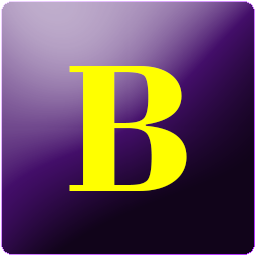
<style>
.page{position:relative;width:256px;height:256px}
.page>*{position:absolute;margin:0}
.t1{font:192px "BodoniBT-Bold";color:#ffff00}
</style>
<div class="page">
<p class="t1" style="left:69px;top:66px;width:118px;height:125px">B</p>
</div>
